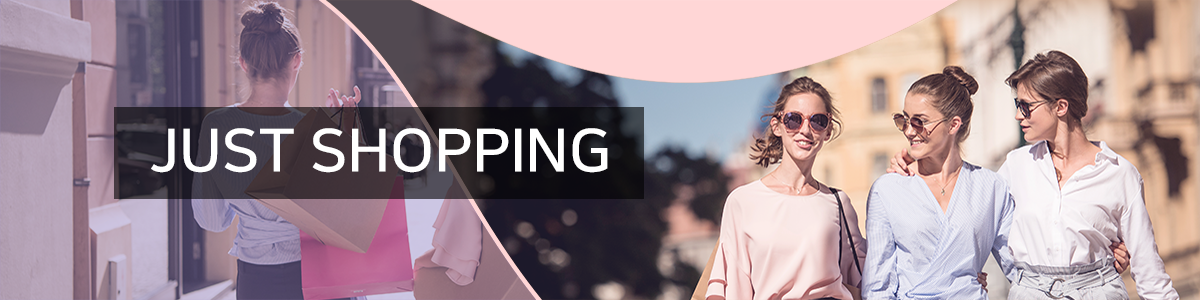
<style>
.page{position:relative;width:1200px;height:300px}
.page>*{position:absolute;margin:0}
.t1{font:59.2px "NanumSquare_acB";letter-spacing:-0.01em;color:#ffffff;scale:1.06 1}
</style>
<div class="page">
<p class="t1" style="left:151px;top:128px;width:457px;height:45px">JUST SHOPPING</p>
</div>
